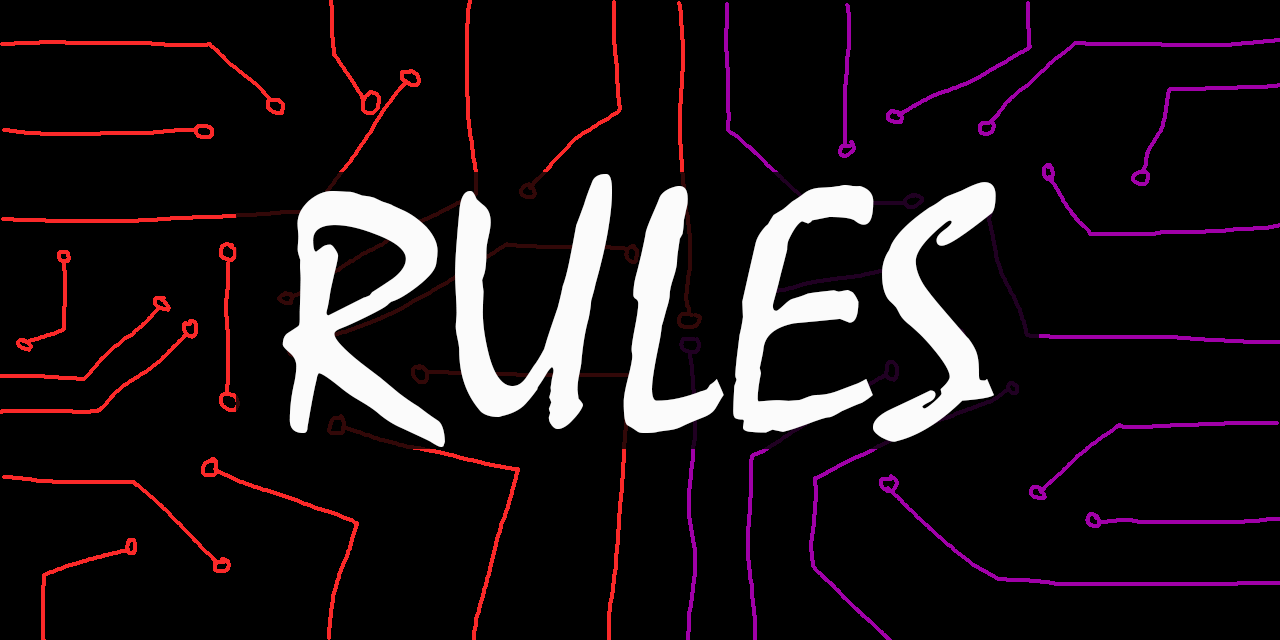
<style>
.page{position:relative;width:1280px;height:640px;background:#000000}
.page>*{position:absolute;margin:0}
.t1{font:350px "Mistral";color:#fbfbfb}
</style>
<div class="page">
<p class="t1" style="left:282px;top:174px;width:714px;height:273px">RULES</p>
</div>
